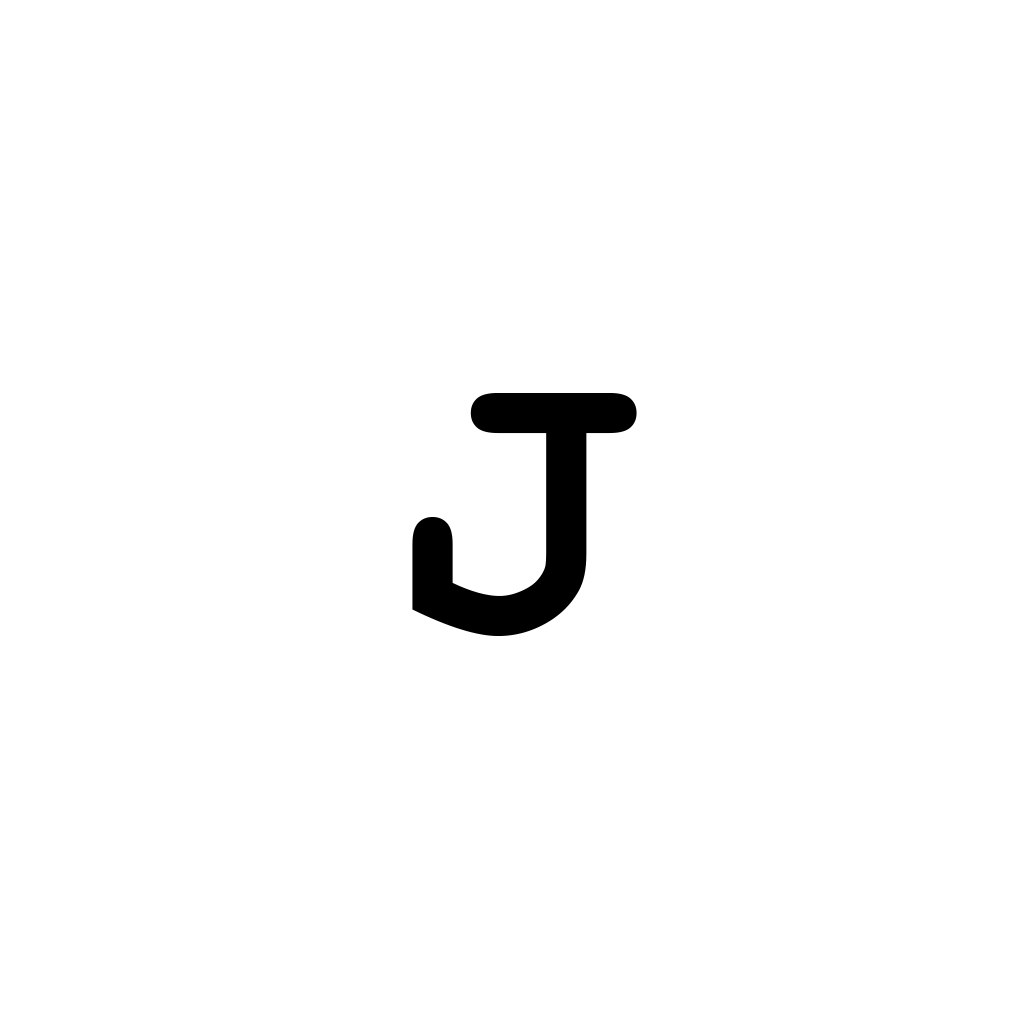
<style>
.page{position:relative;width:1024px;height:1024px;background:#ffffff}
.page>*{position:absolute;margin:0}
.t1{font:400px "CourierNewPS-BoldMT";color:#000000}
</style>
<div class="page">
<p class="t1" style="left:412px;top:393px;width:225px;height:243px">J</p>
</div>
